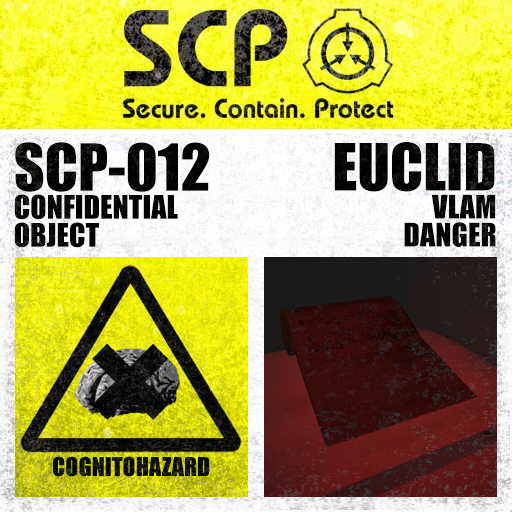
<style>
.page{position:relative;width:512px;height:512px}
.page>*{position:absolute;margin:0}
.t1{font:30px/28px "Impact";color:#000000}
.t2{font:60px/28px "Impact";color:#000000}
</style>
<div class="page">
<p class="t1" style="left:14px;top:142px;width:196px;height:106px"><span class="t2">SCP-012<br></span>CONFIDENTIAL<br>OBJECT</p>
<p class="t1" style="left:334px;top:142px;width:162px;height:105px;text-align:right"><span class="t2">EUCLID<br></span>VLAM<br>DANGER</p>
</div>
